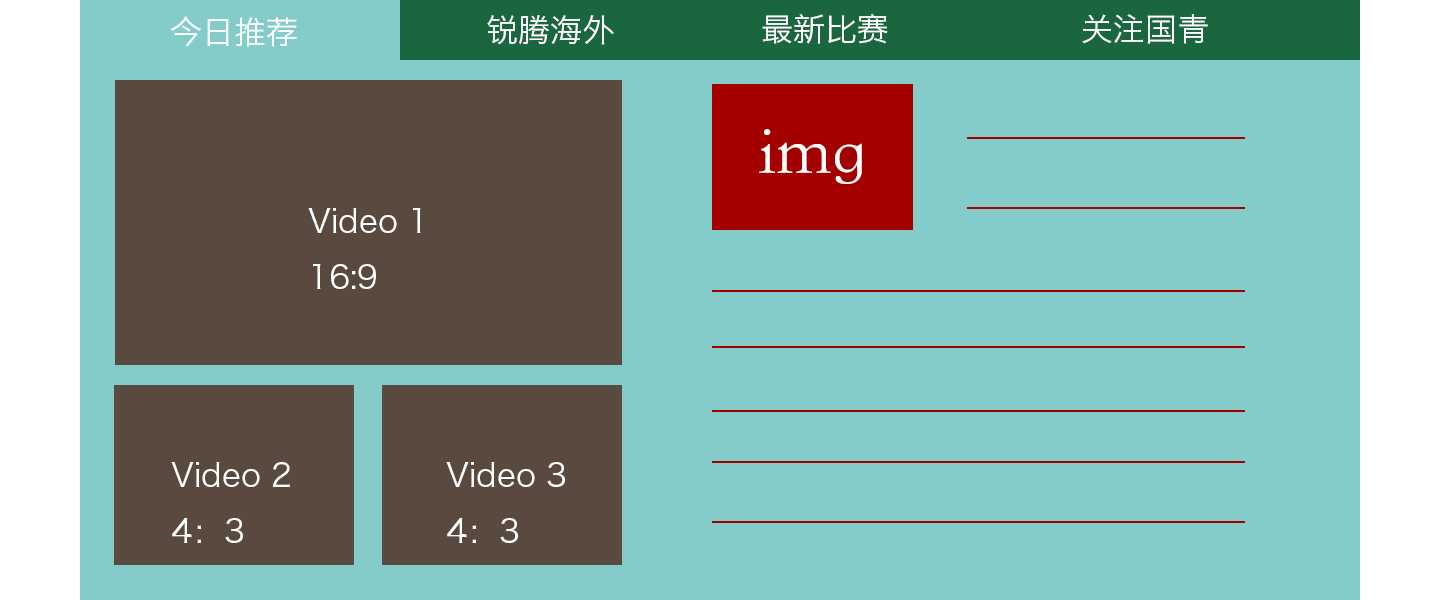
<style>
.page{position:relative;width:1440px;height:600px;background:#84ccc9}
.page>*{position:absolute;margin:0}
.t1{font:32px "HiraginoSansGB-W3";color:#ffffff}
.t2{font:72px "STKaiti-SC-Regular";color:#ffffff}
</style>
<div class="page">
<p class="t1" style="left:171px;top:16px;width:126px;height:31px">今日推荐</p>
<p class="t1" style="left:487px;top:15px;width:127px;height:30px">锐腾海外</p>
<p class="t1" style="left:762px;top:13px;width:126px;height:31px">最新比赛</p>
<p class="t1" style="left:1082px;top:14px;width:126px;height:30px">关注国青</p>
<p class="t2" style="left:759px;top:129px;width:103px;height:55px">img</p>
<p class="t1" style="left:308px;top:208px;width:113px;height:81px">Video 1<br>16:9</p>
<p class="t1" style="left:171px;top:462px;width:119px;height:81px">Video 2<br>4：3</p>
<p class="t1" style="left:446px;top:462px;width:119px;height:81px">Video 3<br>4：3</p>
</div>
